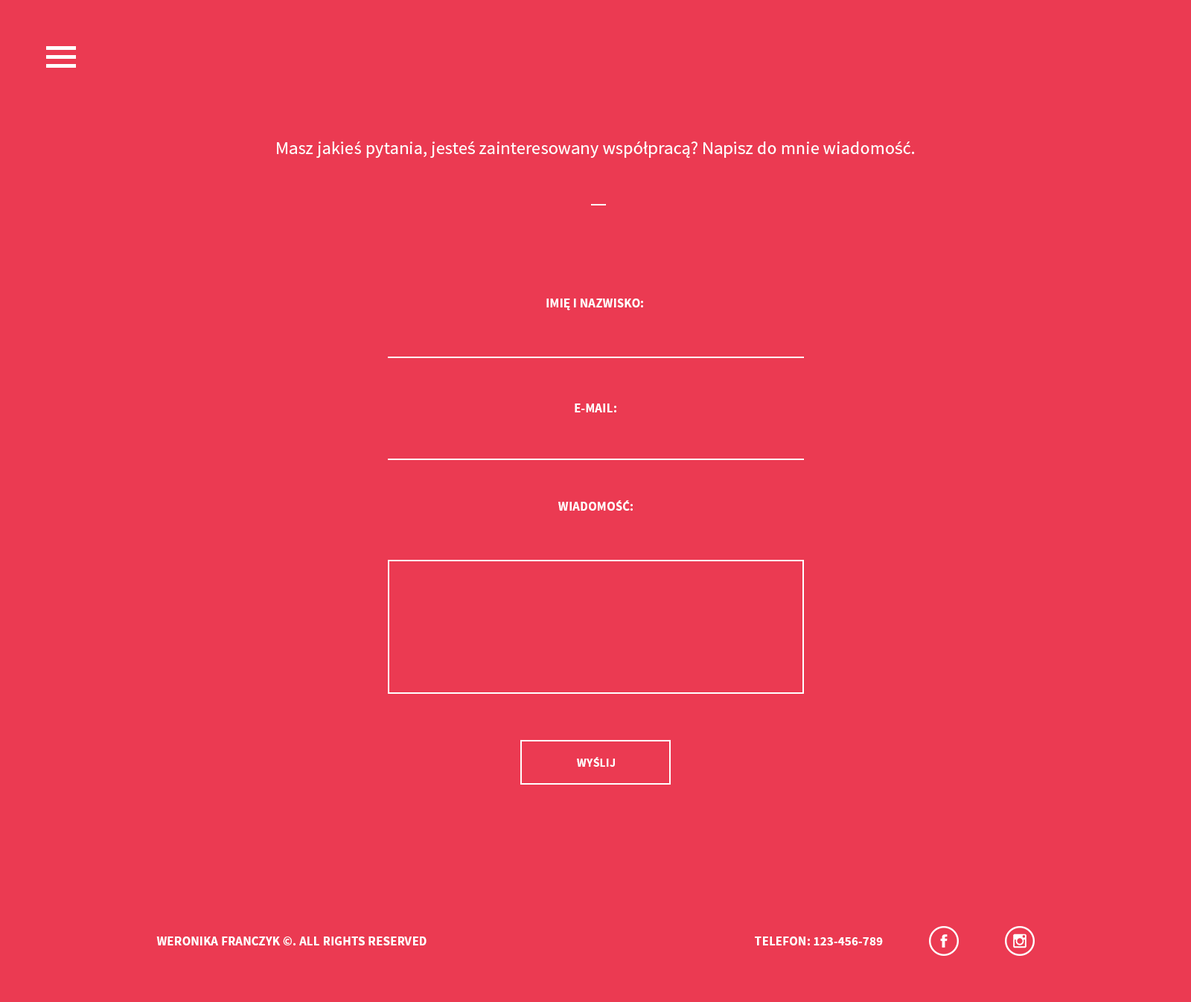
<style>
.page{position:relative;width:1191px;height:1002px;background:#eb3a52}
.page>*{position:absolute;margin:0}
.t1{font:17.9px "SourceSansPro-Regular";letter-spacing:0.01em;color:#ffffff}
.t2{font:12.6px "SourceSansPro-Bold";letter-spacing:0.01em;color:#ffffff;text-transform:uppercase}
.t3{font:11.9px "SourceSansPro-Bold";letter-spacing:0.01em;color:#ffffff;text-transform:uppercase}
</style>
<div class="page">
<p class="t1" style="left:277px;top:141px;width:638px;height:17px">Masz jakieś pytania, jesteś zainteresowany współpracą? Napisz do mnie wiadomość.</p>
<p class="t2" style="left:546px;top:298px;width:97px;height:12px">Imię i nazwisko:</p>
<p class="t2" style="left:574px;top:403px;width:42px;height:9px">E-mail:</p>
<p class="t2" style="left:558px;top:500px;width:74px;height:10px">Wiadomość:</p>
<p class="t3" style="left:577px;top:757px;width:38px;height:9px">Wyślij</p>
<p class="t2" style="left:156px;top:936px;width:270px;height:9px">Weronika Franczyk ©. ALL RIGHTS RESERVED</p>
<p class="t2" style="left:755px;top:936px;width:128px;height:9px">Telefon: 123-456-789</p>
</div>
